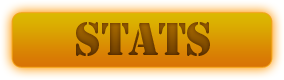
<style>
.page{position:relative;width:284px;height:80px}
.page>*{position:absolute;margin:0}
.t1{font:42.6px "StencilStd";color:#804c00}
</style>
<div class="page">
<p class="t1" style="left:76px;top:22px;width:134px;height:34px">Stats</p>
</div>
